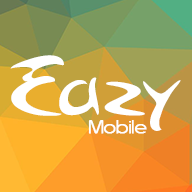
<style>
.page{position:relative;width:192px;height:192px}
.page>*{position:absolute;margin:0}
.t1{font:72.8px "Arabolical1";color:#ffffff;scale:1.04 1}
.t2{font:22.2px "Asenine";color:#ffffff;font-weight:bold;scale:1.21 1}
</style>
<div class="page">
<p class="t1" style="left:10px;top:55px;width:171px;height:76px">Eazy</p>
<p class="t2" style="left:88px;top:120px;width:59px;height:14px">Mobile</p>
</div>
